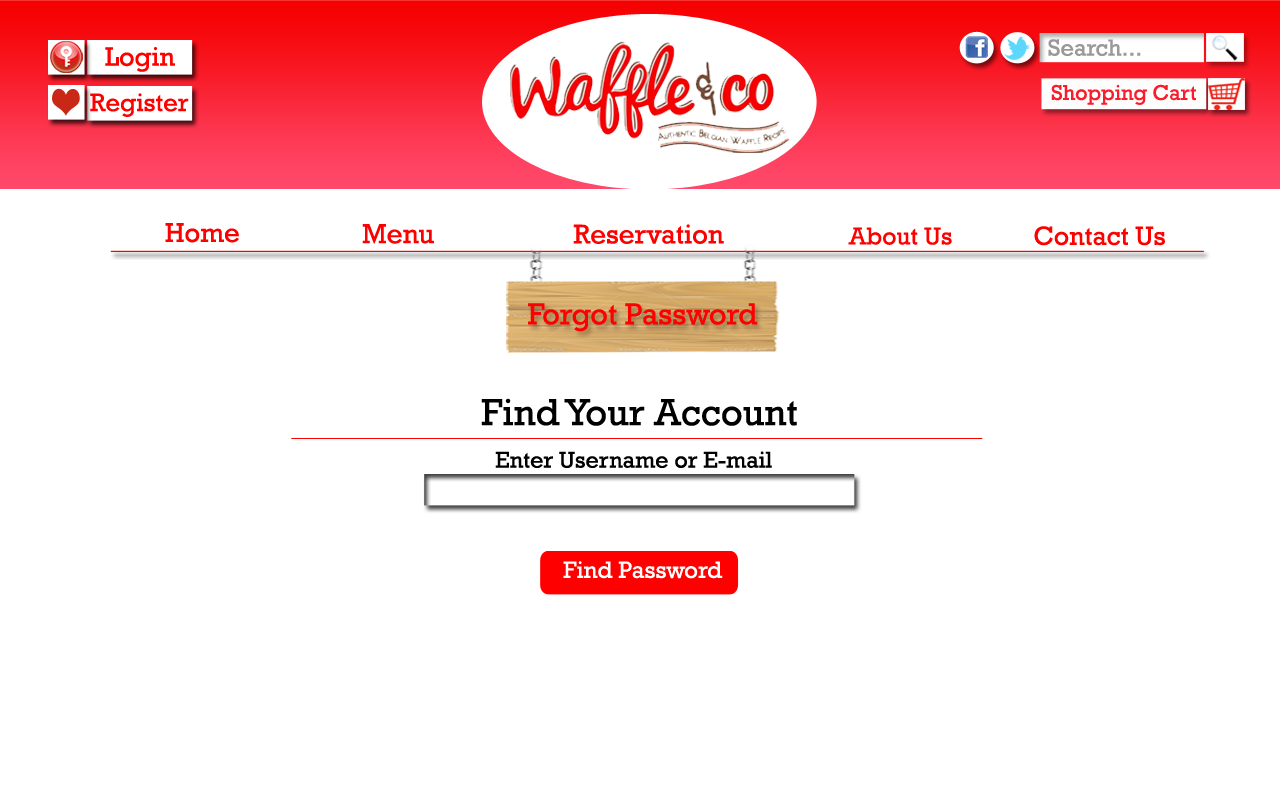
<style>
.page{position:relative;width:1280px;height:800px;background:#ffffff}
.page>*{position:absolute;margin:0}
.t1{font:27.5px "Rockwell";color:#fe0000}
.t2{font:28px "Rockwell";color:#fe0000}
.t3{font:27.6px "Rockwell";color:#fe0000}
.t4{font:24.9px "Rockwell";color:#fe0000}
.t5{font:26.7px "Rockwell";color:#fe0000}
.t6{font:30.7px "Rockwell";color:#fe0000}
.t7{font:38.3px "Rockwell";color:#000000}
.t8{font:23.3px "Rockwell";color:#000000}
.t9{font:24px "Rockwell";color:#ffffff}
</style>
<div class="page">
<p class="t1" style="left:165px;top:223px;width:74px;height:20px">Home</p>
<p class="t2" style="left:362px;top:224px;width:72px;height:20px">Menu</p>
<p class="t3" style="left:573px;top:224px;width:151px;height:20px">Reservation</p>
<p class="t4" style="left:848px;top:227px;width:104px;height:18px">About Us</p>
<p class="t5" style="left:1034px;top:226px;width:131px;height:20px">Contact Us</p>
<p class="t6" style="left:528px;top:303px;width:230px;height:29px">Forgot Password</p>
<p class="t7" style="left:481px;top:398px;width:316px;height:28px">Find Your Account</p>
<p class="t8" style="left:495px;top:451px;width:277px;height:17px">Enter Username or E-mail</p>
<p class="t9" style="left:563px;top:561px;width:160px;height:18px">Find Password</p>
</div>
